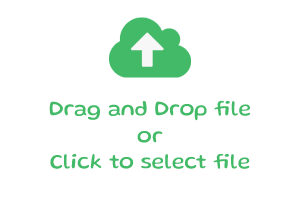
<style>
.page{position:relative;width:300px;height:200px;background:#ffffff}
.page>*{position:absolute;margin:0}
.t1{font:22px "Gluten-Regular";color:#43ba67}
</style>
<div class="page">
<p class="t1" style="left:49px;top:100px;width:202px;height:69px;text-align:center">Drag and Drop file<br>or<br>Click to select file</p>
</div>
